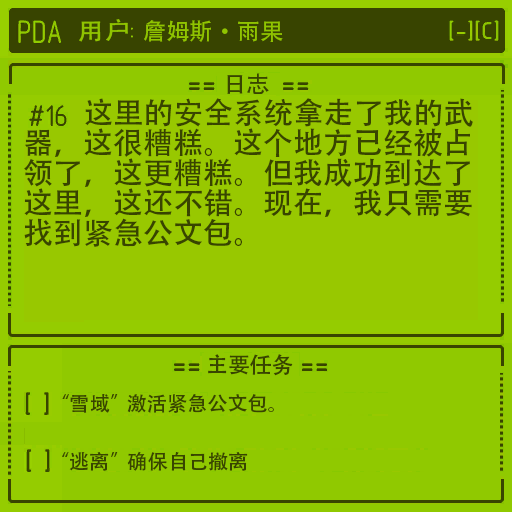
<style>
.page{position:relative;width:512px;height:512px;background:#98c800}
.page>*{position:absolute;margin:0}
.t1{font:30px/30px "AdobeHeitiStd-Regular";color:#384400}
</style>
<div class="page">
<p class="t1" style="left:24px;top:98px;width:449px;height:149px">这里的安全系统拿走了我的武<br>器，这很糟糕。这个地方已经被占<br>领了，这更糟糕。但我成功到达了<br>这里，这还不错。现在，我只需要<br>找到紧急公文包。</p>
</div>
